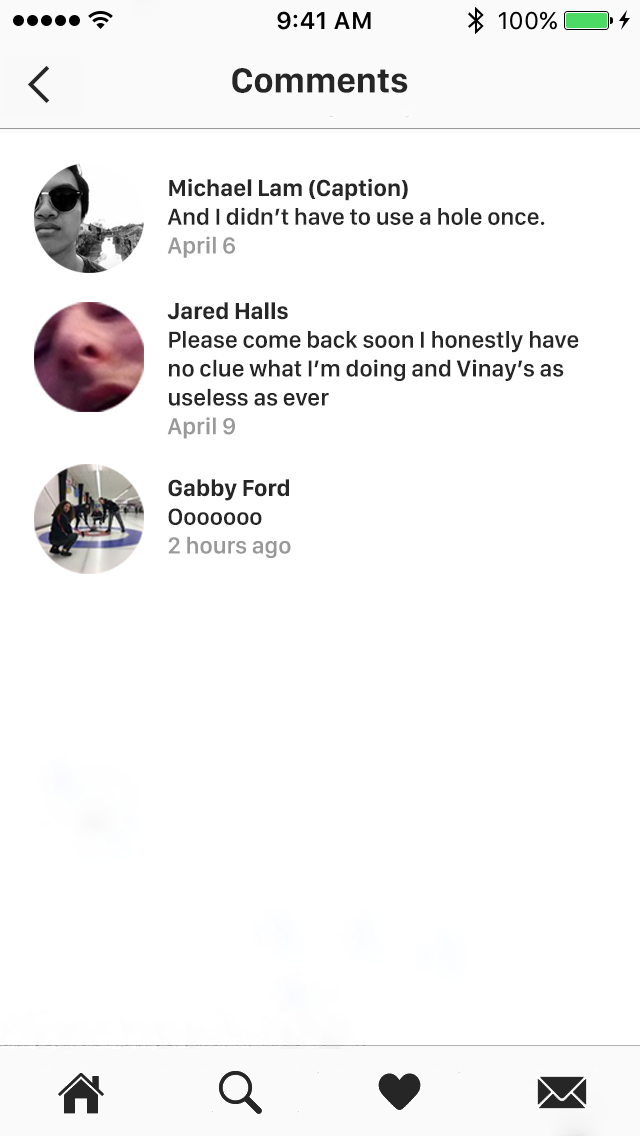
<style>
.page{position:relative;width:640px;height:1136px;background:#ffffff}
.page>*{position:absolute;margin:0}
.t1{font:36px "SanFranciscoDisplay-Bold";color:#262626}
.t2{font:24px "SanFranciscoDisplay-Semibold";color:#262626}
.t3{font:24px "SanFranciscoDisplay-Bold";color:#262626}
.t4{font:24px "SanFranciscoDisplay-Semibold";color:#999999}
</style>
<div class="page">
<p class="t1" style="left:232px;top:68px;width:176px;height:25px">Comments</p>
<p class="t2" style="left:167px;top:178px;width:378px;height:80px"><span class="t3">Michael Lam (Caption)<br></span>And I didn’t have to use a hole once.<br><span class="t4">April 6</span></p>
<p class="t2" style="left:167px;top:302px;width:412px;height:137px"><span class="t3">Jared Halls<br></span>Please come back soon I honestly have<br>no clue what I’m doing and Vinay’s as<br>useless as ever<br><span class="t4">April 9</span></p>
<p class="t4" style="left:168px;top:479px;width:123px;height:79px"><span class="t3">Gabby Ford<br></span><span class="t2">Ooooooo<br></span>2 hours ago</p>
</div>
